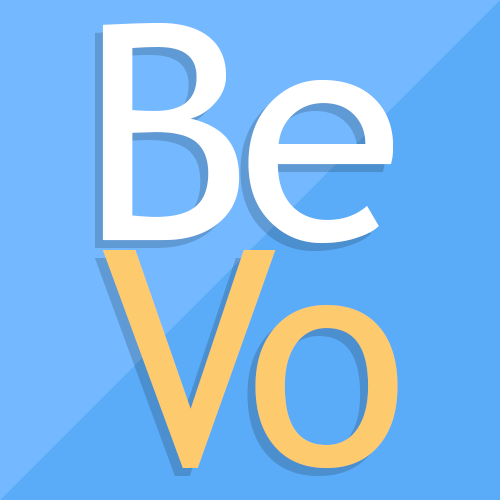
<style>
.page{position:relative;width:500px;height:500px;background:#5aacf8}
.page>*{position:absolute;margin:0}
.t1{font:300px "TrebuchetMS";letter-spacing:-0.04em;color:#ffffff}
.t2{font:300px "TrebuchetMS";letter-spacing:-0.04em;color:#fdcb6e}
</style>
<div class="page">
<p class="t1" style="left:102px;top:23px;width:291px;height:220px">Be</p>
<p class="t2" style="left:102px;top:250px;width:296px;height:218px">Vo</p>
</div>
